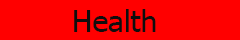
<style>
.page{position:relative;width:240px;height:40px;background:#ff0000}
.page>*{position:absolute;margin:0}
.t1{font:30px "Tahoma";color:#0f0e0e}
</style>
<div class="page">
<p class="t1" style="left:74px;top:9px;width:82px;height:23px">Health</p>
</div>
